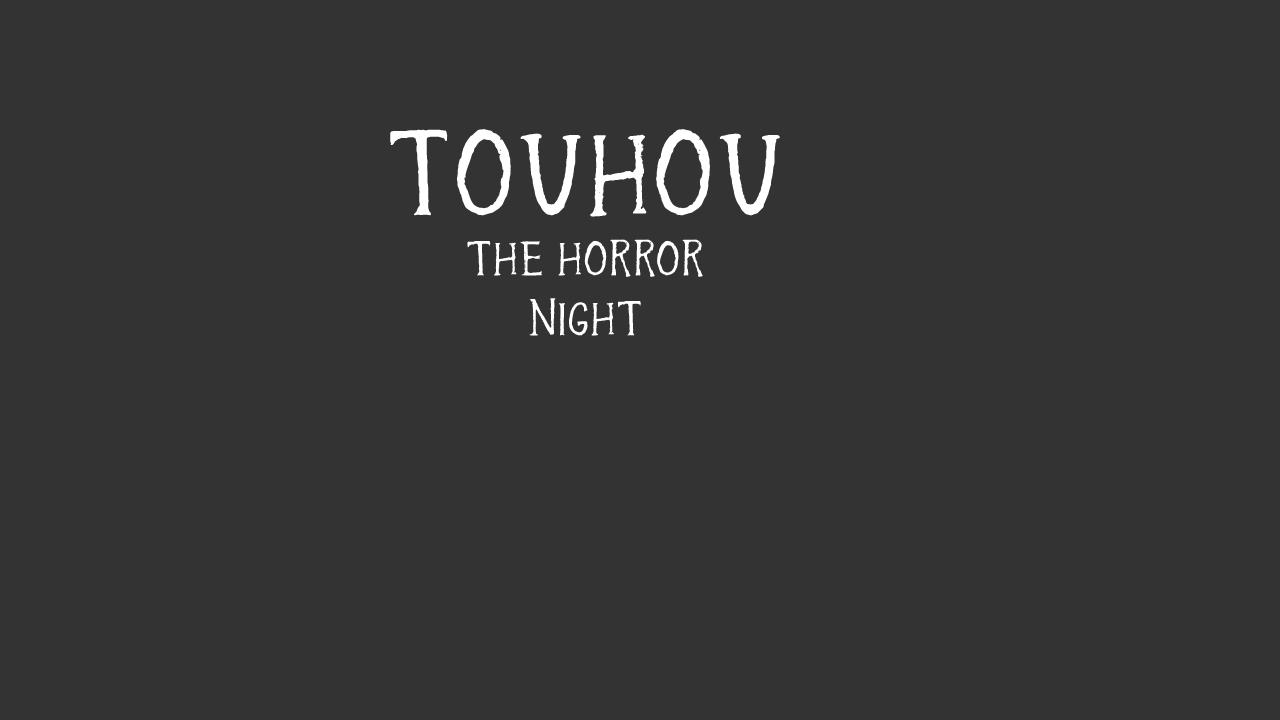
<style>
.page{position:relative;width:1280px;height:720px;background:#333333}
.page>*{position:absolute;margin:0}
.t1{font:50px "Inthewood-Regular";color:#ffffff}
.t2{font:125px/75px "Inthewood-Regular";color:#ffffff}
</style>
<div class="page">
<p class="t1" style="left:390px;top:129px;width:390px;height:207px;text-align:center"><span class="t2">TOUHOU<br></span>the Horror <br>night</p>
</div>
